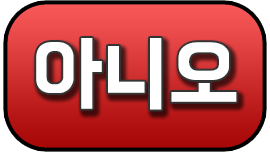
<style>
.page{position:relative;width:270px;height:152px}
.page>*{position:absolute;margin:0}
.t1{font:85px "BMHANNAPro";color:#ffffff}
</style>
<div class="page">
<p class="t1" style="left:36px;top:38px;width:201px;height:72px">아니오</p>
</div>
